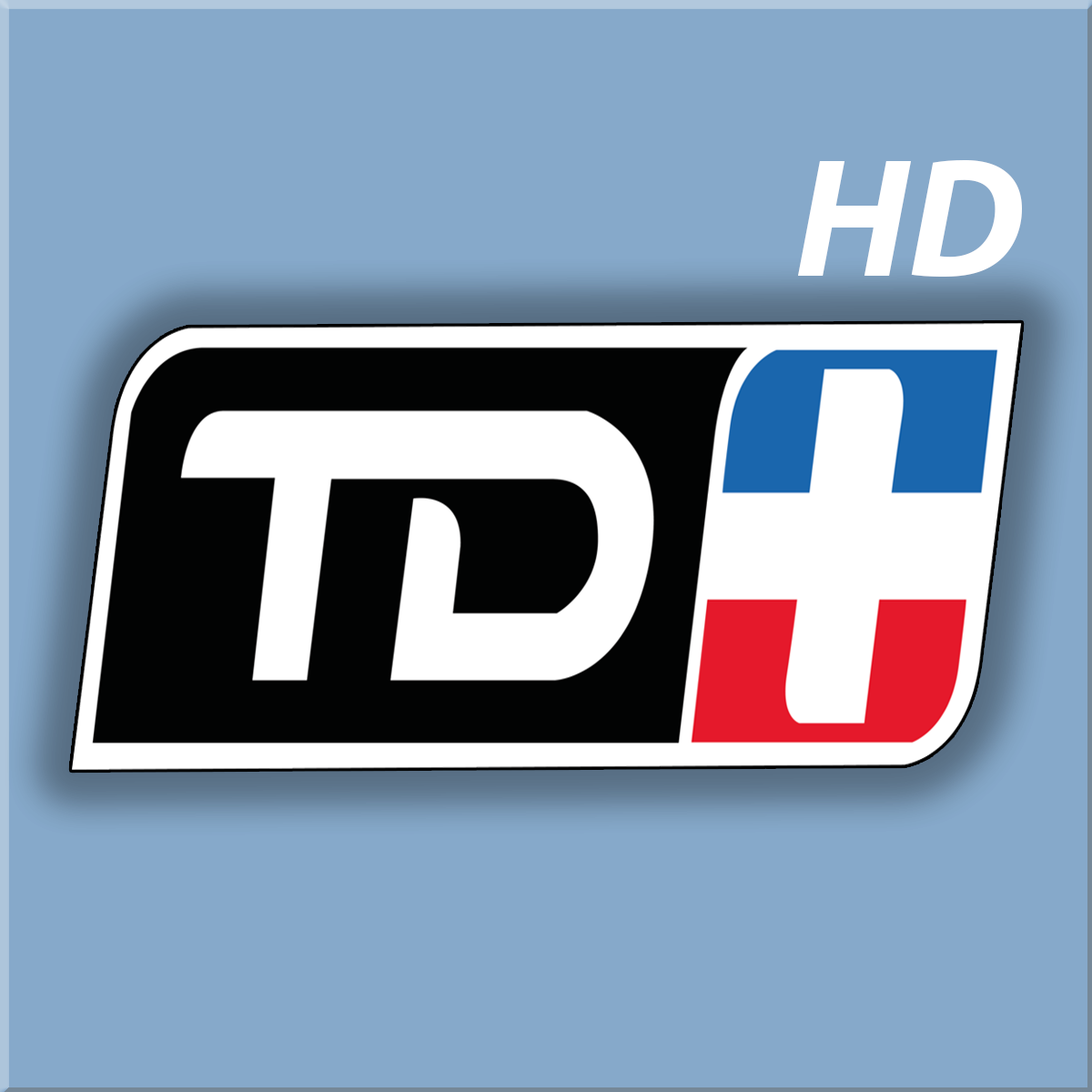
<style>
.page{position:relative;width:1092px;height:1092px;background:#86a9ca}
.page>*{position:absolute;margin:0}
.t1{font:170.6px "MyriadPro-BoldIt";color:#ffffff}
</style>
<div class="page">
<p class="t1" style="left:798px;top:160px;width:224px;height:117px">HD</p>
</div>
